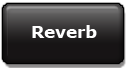
<style>
.page{position:relative;width:128px;height:68px}
.page>*{position:absolute;margin:0}
.t1{font:16.7px "Verdana-Bold";color:#ffffff}
</style>
<div class="page">
<p class="t1" style="left:32px;top:25px;width:65px;height:13px">Reverb</p>
</div>
